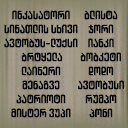
<style>
.page{position:relative;width:128px;height:128px}
.page>*{position:absolute;margin:0}
.t1{font:12px "ArchyEDT-Bold";color:#000000}
</style>
<div class="page">
<p class="t1" style="left:12px;top:10px;width:58px;height:10px">ინკასატორი</p>
<p class="t1" style="left:84px;top:10px;width:34px;height:10px">ბლისტა</p>
<p class="t1" style="left:4px;top:24px;width:74px;height:10px">სინათლის სხივი</p>
<p class="t1" style="left:88px;top:24px;width:26px;height:10px">ჯორი</p>
<p class="t1" style="left:4px;top:38px;width:74px;height:10px">ავტობუს-ლუქსი</p>
<p class="t1" style="left:88px;top:38px;width:26px;height:10px">იანკი</p>
<p class="t1" style="left:21px;top:52px;width:42px;height:10px">ბრტყელა</p>
<p class="t1" style="left:80px;top:52px;width:41px;height:10px">ბობკეტი</p>
<p class="t1" style="left:21px;top:66px;width:40px;height:10px">ლაინერი</p>
<p class="t1" style="left:88px;top:66px;width:26px;height:10px">დოდო</p>
<p class="t1" style="left:22px;top:80px;width:38px;height:10px">მენაგვე</p>
<p class="t1" style="left:78px;top:80px;width:46px;height:10px">ავტობუსი</p>
<p class="t1" style="left:16px;top:94px;width:50px;height:10px">პატრიოტი</p>
<p class="t1" style="left:85px;top:94px;width:32px;height:10px">რუმპო</p>
<p class="t1" style="left:11px;top:108px;width:60px;height:10px">მისტერ ვუპი</p>
<p class="t1" style="left:89px;top:108px;width:24px;height:10px">პონი</p>
</div>
